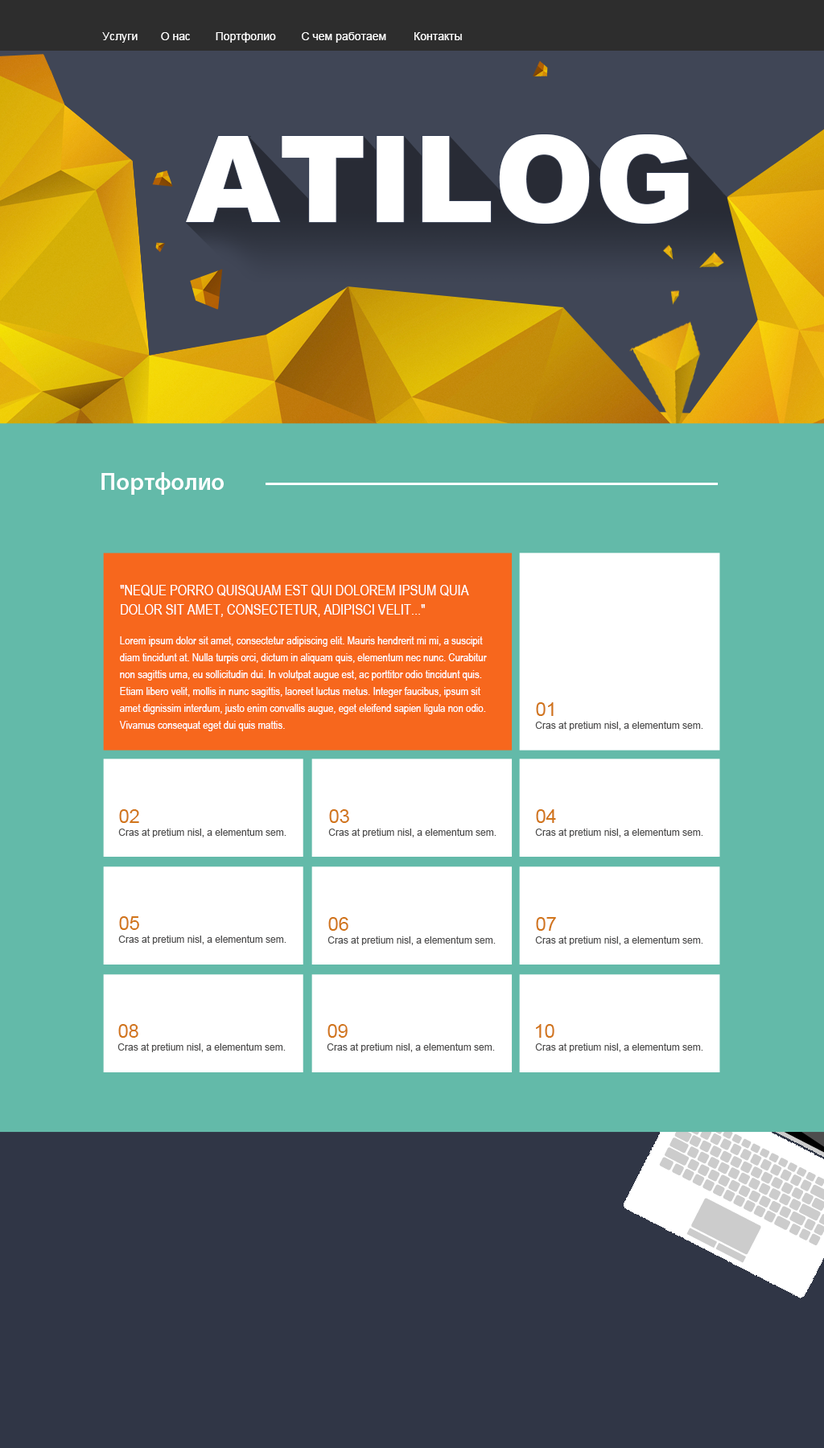
<style>
.page{position:relative;width:824px;height:1448px}
.page>*{position:absolute;margin:0}
.t1{font:11.3px "ArialMT";color:#ffffff}
.t2{font:24.1px "MyriadPro-Semibold";color:#ffffff}
.t3{font:14.5px/19.3px "ArialNarrow";color:#ffffff;text-transform:uppercase}
.t4{font:11.3px/16.9px "ArialNarrow";color:#ffffff}
.t5{font:19.3px "ArialMT";color:#d1751a}
.t6{font:9.7px "ArialMT";color:#4e4d4d}
</style>
<div class="page">
<p class="t1" style="left:102px;top:32px;width:36px;height:11px">Услуги</p>
<p class="t1" style="left:161px;top:32px;width:29px;height:8px">О нас</p>
<p class="t1" style="left:216px;top:32px;width:60px;height:11px">Портфолио</p>
<p class="t1" style="left:302px;top:32px;width:84px;height:11px">С чем работаем</p>
<p class="t1" style="left:414px;top:32px;width:48px;height:8px">Контакты</p>
<p class="t2" style="left:101px;top:472px;width:123px;height:23px">Портфолио</p>
<p class="t3" style="left:120px;top:585px;width:349px;height:32px">"Neque porro quisquam est qui dolorem ipsum quia dolor sit amet, consectetur, adipisci velit..."</p>
<p class="t4" style="left:119px;top:636px;width:368px;height:95px">Lorem ipsum dolor sit amet, consectetur adipiscing elit. Mauris hendrerit mi mi, a suscipit diam tincidunt at. Nulla turpis orci, dictum in aliquam quis, elementum nec nunc. Curabitur non sagittis urna, eu sollicitudin dui. In volutpat augue est, ac porttitor odio tincidunt quis. Etiam libero velit, mollis in nunc sagittis, laoreet luctus metus. Integer faucibus, ipsum sit amet dignissim interdum, justo enim convallis augue, eget eleifend sapien ligula non odio. Vivamus consequat eget dui quis mattis.</p>
<p class="t5" style="left:536px;top:702px;width:17px;height:14px">01</p>
<p class="t6" style="left:535px;top:721px;width:168px;height:9px">Cras at pretium nisl, a elementum sem.</p>
<p class="t5" style="left:119px;top:809px;width:20px;height:14px">02</p>
<p class="t5" style="left:329px;top:809px;width:20px;height:14px">03</p>
<p class="t5" style="left:536px;top:809px;width:20px;height:14px">04</p>
<p class="t6" style="left:118px;top:828px;width:168px;height:9px">Cras at pretium nisl, a elementum sem.</p>
<p class="t6" style="left:328px;top:828px;width:168px;height:9px">Cras at pretium nisl, a elementum sem.</p>
<p class="t6" style="left:535px;top:828px;width:168px;height:9px">Cras at pretium nisl, a elementum sem.</p>
<p class="t5" style="left:119px;top:916px;width:20px;height:14px">05</p>
<p class="t5" style="left:328px;top:917px;width:20px;height:14px">06</p>
<p class="t5" style="left:536px;top:917px;width:20px;height:14px">07</p>
<p class="t6" style="left:118px;top:935px;width:168px;height:9px">Cras at pretium nisl, a elementum sem.</p>
<p class="t6" style="left:327px;top:936px;width:168px;height:9px">Cras at pretium nisl, a elementum sem.</p>
<p class="t6" style="left:535px;top:936px;width:168px;height:9px">Cras at pretium nisl, a elementum sem.</p>
<p class="t5" style="left:118px;top:1024px;width:20px;height:14px">08</p>
<p class="t5" style="left:327px;top:1024px;width:20px;height:14px">09</p>
<p class="t5" style="left:536px;top:1024px;width:18px;height:14px">10</p>
<p class="t6" style="left:117px;top:1043px;width:169px;height:9px">Cras at pretium nisl, a elementum sem.</p>
<p class="t6" style="left:327px;top:1043px;width:168px;height:9px">Cras at pretium nisl, a elementum sem.</p>
<p class="t6" style="left:535px;top:1043px;width:168px;height:9px">Cras at pretium nisl, a elementum sem.</p>
</div>
